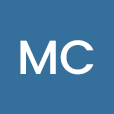
<style>
.page{position:relative;width:114px;height:114px;background:#35709c}
.page>*{position:absolute;margin:0}
.t1{font:48px "Poppins-Medium";color:#ffffff;text-transform:uppercase}
</style>
<div class="page">
<p class="t1" style="left:20px;top:40px;width:74px;height:35px">MC</p>
</div>
